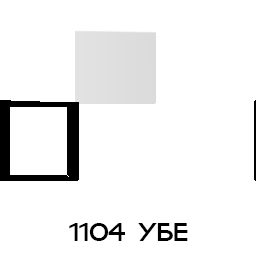
<style>
.page{position:relative;width:256px;height:256px;background:#ffffff}
.page>*{position:absolute;margin:0}
.t1{font:30px "MogulAmbassadore";color:#000000;text-transform:uppercase}
</style>
<div class="page">
<p class="t1" style="left:69px;top:223px;width:119px;height:18px">1104 убе</p>
</div>
